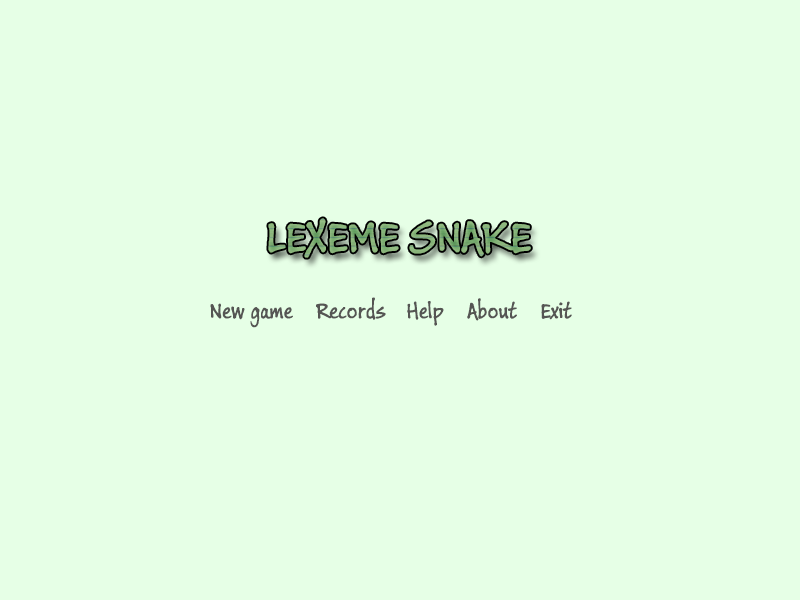
<style>
.page{position:relative;width:800px;height:600px;background:#e6ffe6}
.page>*{position:absolute;margin:0}
.t1{font:24px "BuxtonSketch";color:#555553}
</style>
<div class="page">
<p class="t1" style="left:210px;top:303px;width:83px;height:25px">New game</p>
<p class="t1" style="left:316px;top:297px;width:70px;height:23px">Records</p>
<p class="t1" style="left:407px;top:301px;width:37px;height:25px">Help</p>
<p class="t1" style="left:467px;top:298px;width:50px;height:23px">About</p>
<p class="t1" style="left:541px;top:301px;width:31px;height:19px">Exit</p>
</div>
